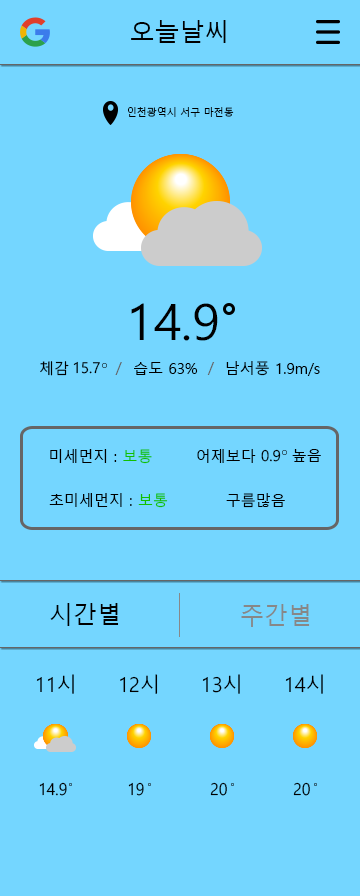
<style>
.page{position:relative;width:360px;height:896px;background:#74d6ff}
.page>*{position:absolute;margin:0}
.t1{font:25px "MalgunGothic";color:#000000}
.t2{font:10px "MalgunGothic";color:#000000}
.t3{font:50px "MalgunGothic";color:#000000}
.t4{font:15px "MalgunGothic";color:#000000}
.t5{font:15px "MalgunGothic";color:#666666}
.t6{font:15px "MalgunGothic";color:#12c000}
.t7{font:24px "MalgunGothic";color:#000000}
.t8{font:24px "MalgunGothic";color:#878787}
.t9{font:20.4px "MalgunGothic";color:#000000}
.t10{font:16.2px "MalgunGothic";color:#000000;scale:0.96 1}
</style>
<div class="page">
<p class="t1" style="left:131px;top:20px;width:95px;height:23px">오늘날씨</p>
<p class="t2" style="left:128px;top:107px;width:106px;height:10px">인천광역시 서구 마전동</p>
<p class="t3" style="left:131px;top:303px;width:87px;height:38px">14.9</p>
<p class="t4" style="left:40px;top:361px;width:29px;height:15px">체감</p>
<p class="t4" style="left:73px;top:361px;width:27px;height:13px">15.7</p>
<p class="t5" style="left:115px;top:362px;width:7px;height:13px">/</p>
<p class="t4" style="left:134px;top:362px;width:64px;height:13px">습도 63%</p>
<p class="t5" style="left:207px;top:362px;width:8px;height:13px">/</p>
<p class="t4" style="left:226px;top:361px;width:94px;height:15px">남서풍 1.9m/s</p>
<p class="t4" style="left:50px;top:449px;width:102px;height:15px">미세먼지 : <span class="t6">보통</span></p>
<p class="t4" style="left:197px;top:449px;width:59px;height:14px">어제보다</p>
<p class="t4" style="left:261px;top:449px;width:20px;height:13px">0.9</p>
<p class="t4" style="left:292px;top:449px;width:29px;height:13px">높음</p>
<p class="t4" style="left:49px;top:493px;width:119px;height:15px">초미세먼지 : <span class="t6">보통</span></p>
<p class="t4" style="left:226px;top:493px;width:59px;height:15px">구름많음</p>
<p class="t7" style="left:50px;top:603px;width:69px;height:23px">시간별</p>
<p class="t8" style="left:241px;top:604px;width:69px;height:23px">주간별</p>
<p class="t9" style="left:36px;top:674px;width:38px;height:20px">11시</p>
<p class="t9" style="left:120px;top:674px;width:38px;height:20px">12시</p>
<p class="t9" style="left:202px;top:674px;width:38px;height:20px">13시</p>
<p class="t9" style="left:285px;top:674px;width:38px;height:20px">14시</p>
<p class="t10" style="left:39px;top:782px;width:28px;height:14px">14.9</p>
<p class="t10" style="left:128px;top:782px;width:16px;height:14px">19</p>
<p class="t10" style="left:210px;top:782px;width:17px;height:14px">20</p>
<p class="t10" style="left:293px;top:782px;width:17px;height:14px">20</p>
</div>
